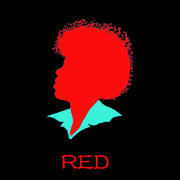
<style>
.page{position:relative;width:180px;height:180px;background:#000000}
.page>*{position:absolute;margin:0}
.t1{font:24px "FZSTK--GBK1-0";letter-spacing:-0.06em;color:#fd0e0e}
</style>
<div class="page">
<p class="t1" style="left:61px;top:155px;width:48px;height:14px">RED</p>
</div>
